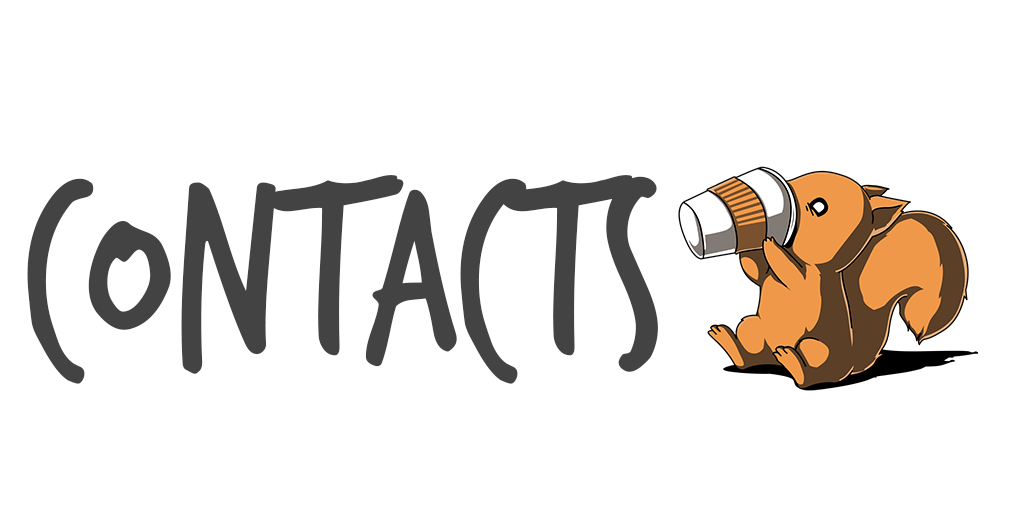
<style>
.page{position:relative;width:1024px;height:512px;background:#ffffff}
.page>*{position:absolute;margin:0}
.t1{font:257.2px "TrashHand";color:#434343;scale:0.89 1}
</style>
<div class="page">
<p class="t1" style="left:27px;top:175px;width:631px;height:209px">CONTACTS</p>
</div>
